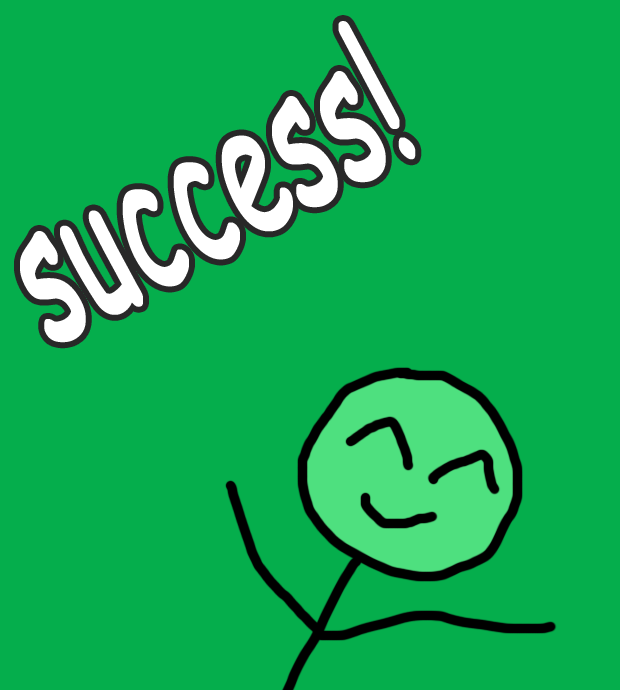
<style>
.page{position:relative;width:620px;height:690px;background:#05ae4c}
.page>*{position:absolute;margin:0}
.t1{font:185.4px "ComicSansMS";color:#ffffff;font-weight:bold;scale:0.57 1}
</style>
<div class="page">
<p class="t1" style="left:20px;top:21px;width:396px;height:322px;rotate:-28deg">success!</p>
</div>
